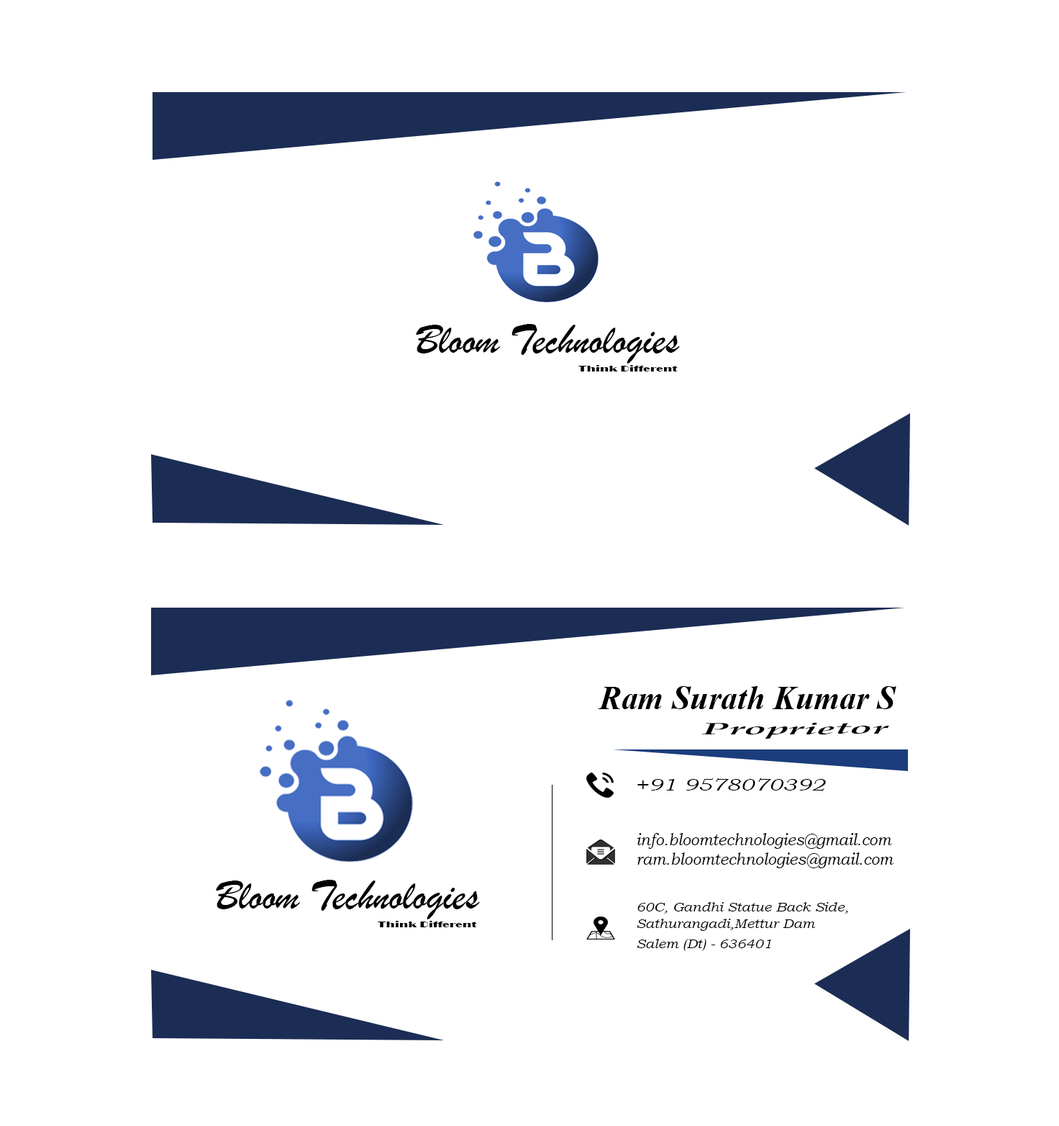
<style>
.page{position:relative;width:1059px;height:1126px;background:#ffffff}
.page>*{position:absolute;margin:0}
.t1{font:43.2px "BrushScriptMT";color:#000101}
.t2{font:8.8px "Broadway";color:#000000;scale:1.35 1}
.t3{font:33px "TimesNewRomanPS-BoldItalicMT";color:#000000}
.t4{font:16.6px "BookAntiqua-BoldItalic";color:#000000;scale:2.39 1}
.t5{font:17.3px "BookmanOldStyle-Italic";color:#000000;scale:1.32 1}
.t6{font:16.3px "BookmanOldStyle-Italic";color:#000000;scale:0.95 1}
.t7{font:12.9px/16.8px "BookmanOldStyle-Italic";color:#000000;scale:1.11 1}
.t8{font:12.9px/10.1px "BookmanOldStyle-Italic";color:#000000;scale:1.11 1}
</style>
<div class="page">
<p class="t1" style="left:416px;top:324px;width:264px;height:39px">Bloom Technologies</p>
<p class="t2" style="left:579px;top:365px;width:99px;height:6px">Think Different</p>
<p class="t3" style="left:598px;top:686px;width:299px;height:23px">Ram Surath Kumar S</p>
<p class="t4" style="left:702px;top:722px;width:188px;height:17px">Proprietor</p>
<p class="t5" style="left:638px;top:778px;width:188px;height:13px">+91 9578070392</p>
<p class="t6" style="left:637px;top:833px;width:258px;height:35px">info.bloomtechnologies@gmail.com<br>ram.bloomtechnologies@gmail.com</p>
<p class="t1" style="left:216px;top:879px;width:264px;height:40px">Bloom Technologies</p>
<p class="t7" style="left:637px;top:902px;width:212px;height:49px">60C, Gandhi Statue Back Side,<br>Sathurangadi,<span class="t8">Mettur Dam <br><br>Salem (Dt) - 636401</span></p>
<p class="t2" style="left:378px;top:920px;width:99px;height:7px">Think Different</p>
</div>
